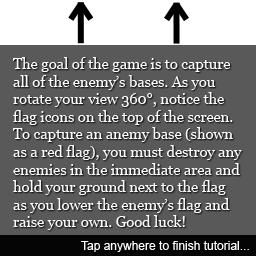
<style>
.page{position:relative;width:256px;height:256px;background:#595959}
.page>*{position:absolute;margin:0}
.t1{font:14.7px "Georgia";color:#fefefe}
.t2{font:12px "ArialMT";color:#ffffff}
</style>
<div class="page">
<p class="t1" style="left:12px;top:57px;width:230px;height:173px">The goal of the game is to capture<br>all of the enemy’s bases. As you<br>rotate your view 360°, notice the<br>flag icons on the top of the screen.<br>To capture an anemy base (shown<br>as a red flag), you must destroy any<br>enemies in the immediate area and<br>hold your ground next to the flag<br>as you lower the enemy’s flag and<br>raise your own. Good luck!</p>
<p class="t2" style="left:81px;top:241px;width:168px;height:11px">Tap anywhere to finish tutorial...</p>
</div>
